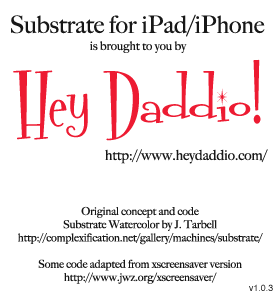
<style>
.page{position:relative;width:280px;height:300px;background:#ffffff}
.page>*{position:absolute;margin:0}
.t1{font:24px "BigCaslon-Medium";color:#171717}
.t2{font:12px "BigCaslon-Medium";color:#171717}
.t3{font:72px "Fontdinerdotcom";color:#ed1b32}
.t4{font:72px "FontdinerdotcomSparkly";color:#ed1b32}
.t5{font:14px "BigCaslon-Medium";color:#171717}
.t6{font:11px "BigCaslon-Medium";color:#171717}
.t7{font:9px "Helvetica"}
</style>
<div class="page">
<p class="t1" style="left:11px;top:14px;width:254px;height:23px">Substrate for iPad/iPhone</p>
<p class="t2" style="left:90px;top:41px;width:97px;height:12px">is brought to you by</p>
<p class="t3" style="left:13px;top:59px;width:248px;height:82px">Hey Dadd<span class="t4">i</span>o!</p>
<p class="t5" style="left:105px;top:149px;width:163px;height:15px">http://www.heydaddio.com/</p>
<p class="t6" style="left:18px;top:206px;width:245px;height:78px;text-align:center">Original concept and code<br>Substrate Watercolor by J. Tarbell<br>http://complexification.net/gallery/machines/substrate/<br><br>Some code adapted from xscreensaver version<br>http://www.jwz.org/xscreensaver/</p>
<p class="t7" style="left:249px;top:284px;width:24px;height:7px">v1.0.3</p>
</div>
